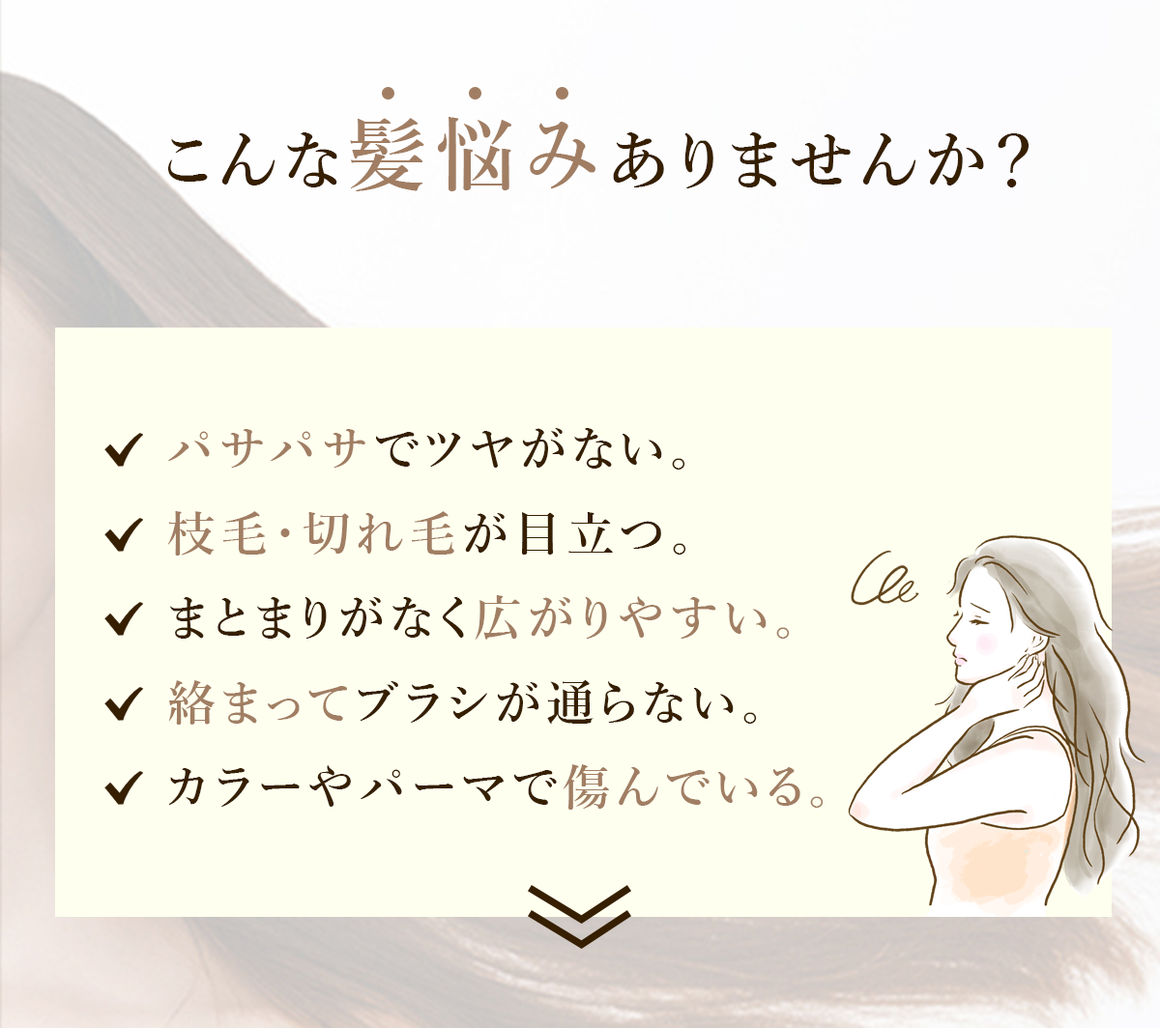
<style>
.page{position:relative;width:1160px;height:1028px;background:#feffef}
.page>*{position:absolute;margin:0}
.t1{font:64.4px "YuMincho-Demibold";letter-spacing:0.1em;color:#361f00}
.t2{font:80.5px "YuMincho-Demibold";letter-spacing:0.1em;color:#a17e63}
.t3{font:48.3px "YuMincho-Demibold";letter-spacing:0.1em;color:#361f00}
.t4{font:48.3px "YuMincho-Demibold";letter-spacing:0.1em;color:#a17e63}
</style>
<div class="page">
<p class="t1" style="left:168px;top:117px;width:861px;height:74px">こんな<span class="t2">髪悩み</span>ありませんか？</p>
<p class="t3" style="left:167px;top:428px;width:656px;height:382px"><span class="t4">パサパサ</span>でツヤがない。<br><span class="t4">枝毛・切れ毛</span>が目立つ。<br>まとまりがなく<span class="t4">広がりやすい。<br>絡まって</span>ブラシが通らない。<br>カラーやパーマで<span class="t4">傷んでいる。</span></p>
</div>
